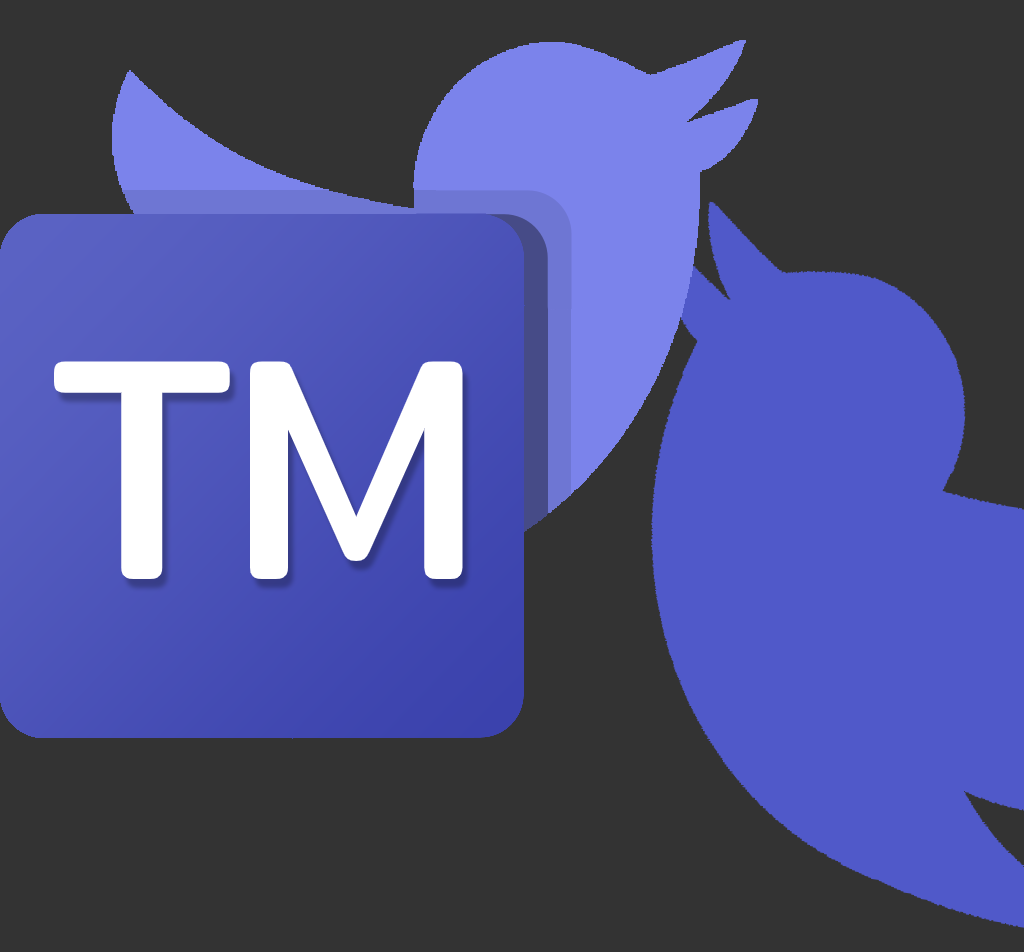
<style>
.page{position:relative;width:1024px;height:952px;background:#333333}
.page>*{position:absolute;margin:0}
.t1{font:320px "Mitr-Regular";color:#ffffff}
</style>
<div class="page">
<p class="t1" style="left:54px;top:361px;width:409px;height:218px">TM</p>
</div>
